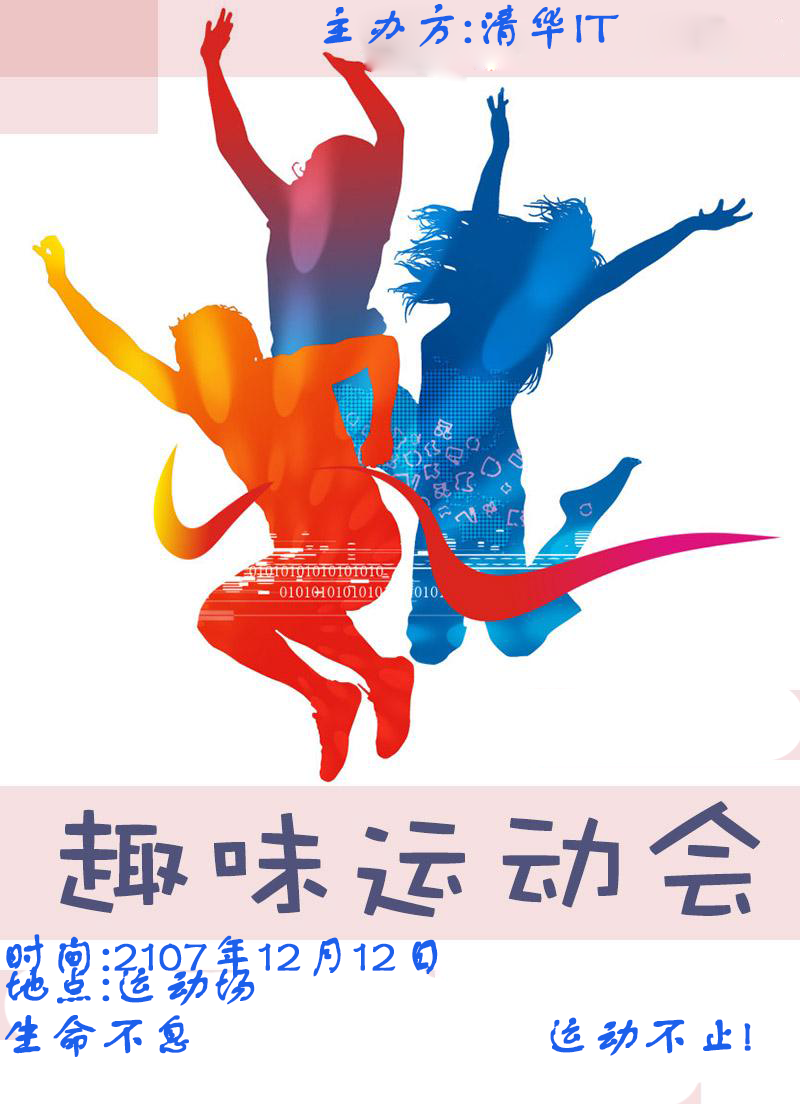
<style>
.page{position:relative;width:800px;height:1104px;background:#ffffff}
.page>*{position:absolute;margin:0}
.t1{font:48px "FZSTK--GBK1-0";color:#1c60eb;font-weight:bold}
</style>
<div class="page">
<p class="t1" style="left:323px;top:4px;width:296px;height:45px">主办方:清华IT<br>主办方</p>
<p class="t1" style="left:6px;top:934px;width:432px;height:44px">时间:2107年12月12日</p>
<p class="t1" style="left:6px;top:966px;width:249px;height:40px">地点:运动场</p>
<p class="t1" style="left:5px;top:1015px;width:746px;height:42px">生命不息                          运动不止!</p>
</div>
